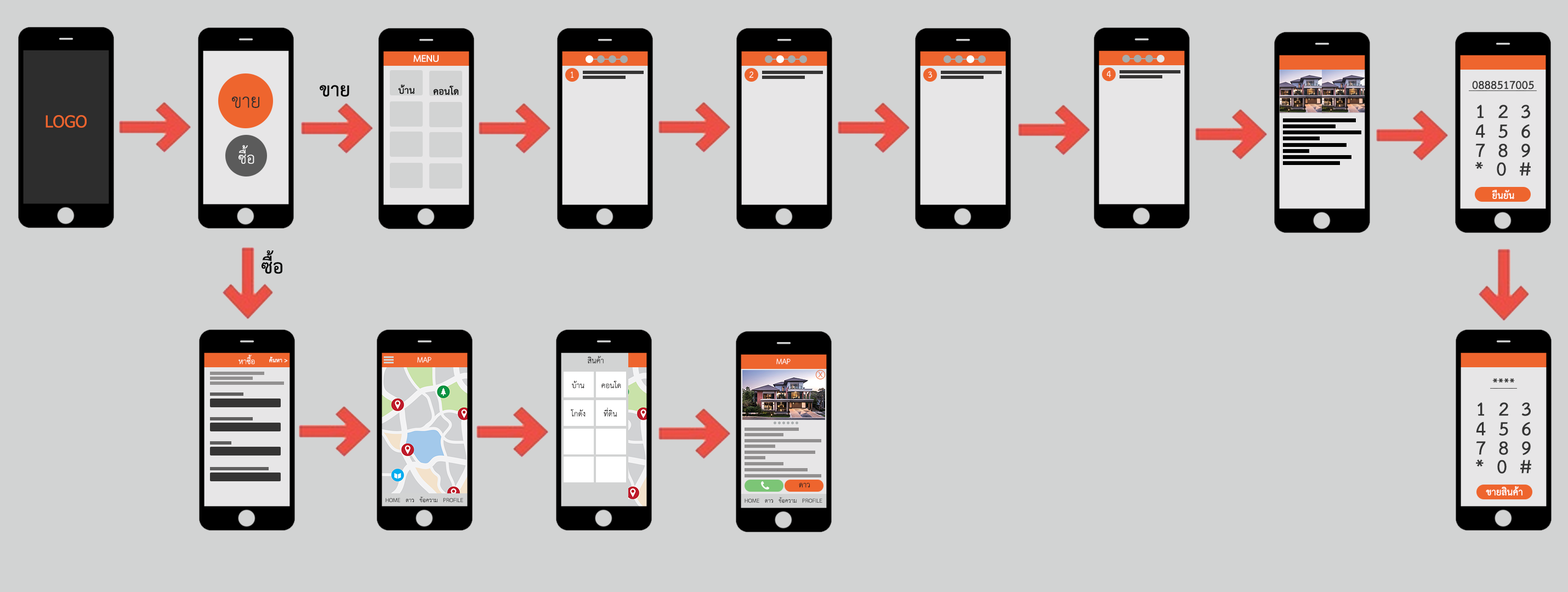
<style>
.page{position:relative;width:1568px;height:592px;background:#d2d3d3}
.page>*{position:absolute;margin:0}
.t1{font:13.7px "THSarabunPSK-Bold";color:#ffffff}
.t2{font:12.4px "THSarabunPSK";color:#ffffff}
.t3{font:27.4px "THSarabunPSK-Bold";color:#000000}
.t4{font:13.7px "THSarabunPSK-Bold";color:#000000}
.t5{font:16.4px "THSarabunPSK-Bold";color:#343434}
.t6{font:27.4px "THSarabunPSK";color:#2d2d2d}
.t7{font:27.4px "THSarabunPSK-Bold";color:#343434}
.t8{font:16.4px "Tahoma";color:#ee652e}
.t9{font:21.9px "THSarabunPSK";color:#ffffff}
.t10{font:11px "THSarabunPSK";color:#ffffff}
.t11{font:8.2px "THSarabunPSK-Bold";color:#ffffff}
.t12{font:11px "THSarabunPSK";color:#201f1f}
.t13{font:11px "THSarabunPSK";color:#ee652e}
.t14{font:8.2px "THSarabunPSK";color:#363636}
</style>
<div class="page">
<p class="t1" style="left:413px;top:55px;width:26px;height:7px">MENU</p>
<p class="t2" style="left:571px;top:71px;width:2px;height:7px">1</p>
<p class="t2" style="left:749px;top:71px;width:5px;height:7px">2</p>
<p class="t2" style="left:928px;top:71px;width:4px;height:7px">3</p>
<p class="t2" style="left:1107px;top:71px;width:4px;height:6px">4</p>
<p class="t3" style="left:320px;top:85px;width:29px;height:12px">ขาย</p>
<p class="t4" style="left:398px;top:84px;width:17px;height:10px">บ้าน</p>
<p class="t4" style="left:433px;top:86px;width:25px;height:9px">คอนโด</p>
<p class="t5" style="left:1472px;top:81px;width:62px;height:8px">0888517005</p>
<p class="t6" style="left:232px;top:96px;width:27px;height:12px">ขาย</p>
<p class="t7" style="left:1477px;top:105px;width:53px;height:13px">1  2  3</p>
<p class="t8" style="left:46px;top:115px;width:41px;height:13px">LOGO</p>
<p class="t7" style="left:1475px;top:124px;width:55px;height:14px">4  5  6</p>
<p class="t9" style="left:238px;top:145px;width:16px;height:19px">ซื้อ</p>
<p class="t7" style="left:1475px;top:144px;width:55px;height:14px">7  8  9</p>
<p class="t7" style="left:1475px;top:162px;width:56px;height:14px">*  0  #</p>
<p class="t1" style="left:1492px;top:190px;width:22px;height:9px">ยืนยัน</p>
<p class="t3" style="left:262px;top:250px;width:20px;height:24px">ซื้อ</p>
<p class="t10" style="left:238px;top:355px;width:17px;height:10px">หาซื้อ</p>
<p class="t11" style="left:269px;top:356px;width:19px;height:6px">ค้นหา &gt;</p>
<p class="t10" style="left:417px;top:357px;width:14px;height:6px">MAP</p>
<p class="t12" style="left:587px;top:356px;width:17px;height:7px">สินค้า</p>
<p class="t10" style="left:776px;top:359px;width:15px;height:6px">MAP</p>
<p class="t13" style="left:818px;top:372px;width:5px;height:6px">X</p>
<p class="t12" style="left:572px;top:380px;width:12px;height:9px">บ้าน</p>
<p class="t12" style="left:601px;top:380px;width:20px;height:9px">คอนโด</p>
<p class="t5" style="left:1493px;top:378px;width:21px;height:5px">****</p>
<p class="t12" style="left:571px;top:409px;width:15px;height:8px">โกดัง</p>
<p class="t12" style="left:604px;top:407px;width:13px;height:10px">ที่ดิน</p>
<p class="t7" style="left:1478px;top:402px;width:53px;height:14px">1  2  3</p>
<p class="t7" style="left:1476px;top:422px;width:55px;height:14px">4  5  6</p>
<p class="t7" style="left:1476px;top:441px;width:55px;height:15px">7  8  9</p>
<p class="t7" style="left:1476px;top:459px;width:55px;height:15px">*  0  #</p>
<p class="t12" style="left:799px;top:483px;width:11px;height:5px">ดาว</p>
<p class="t14" style="left:385px;top:497px;width:78px;height:6px">HOME   ดาว   ข้อความ   PROFILE</p>
<p class="t14" style="left:745px;top:497px;width:77px;height:6px">HOME   ดาว   ข้อความ   PROFILE</p>
<p class="t1" style="left:1486px;top:486px;width:36px;height:10px">ขายสินค้า</p>
</div>
